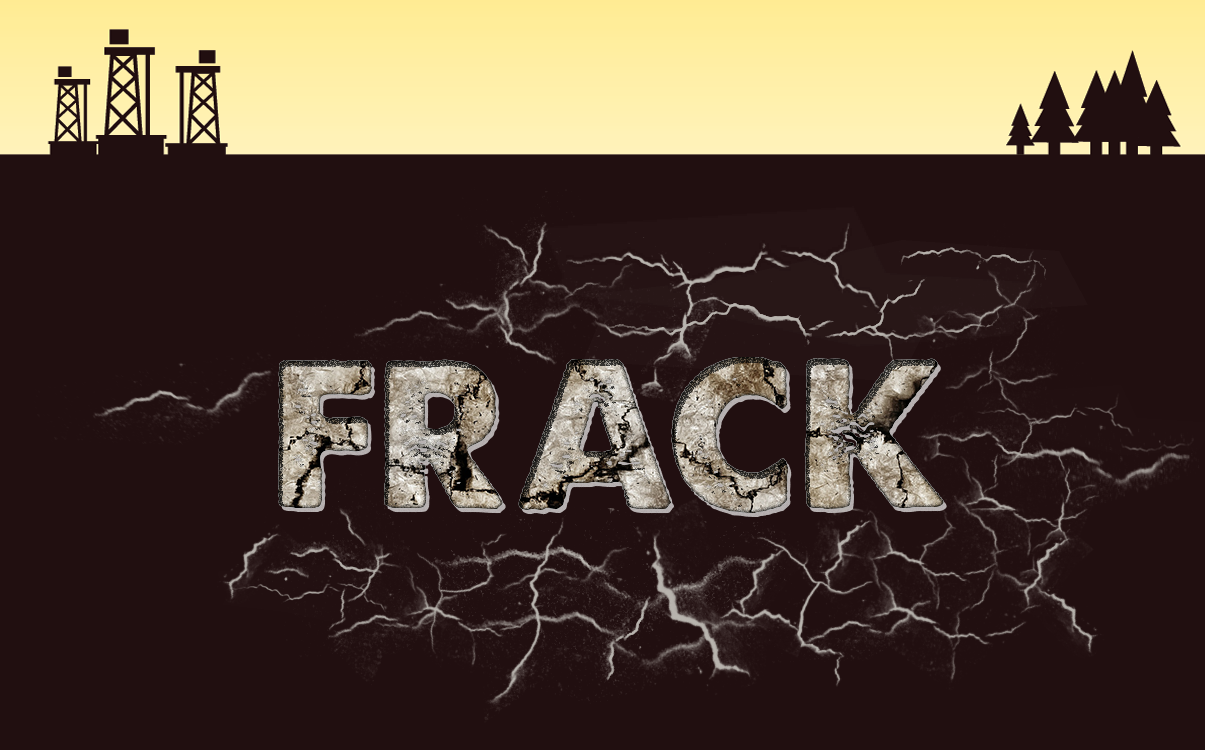
<style>
.page{position:relative;width:1205px;height:750px;background:#210f10}
.page>*{position:absolute;margin:0}
.t1{font:200px "ALoveofThunder"}
</style>
<div class="page">
<p class="t1" style="left:278px;top:357px;width:666px;height:156px">FRACK</p>
<p class="t1" style="left:278px;top:357px;width:666px;height:156px">FRACK</p>
<p class="t1" style="left:278px;top:357px;width:666px;height:156px">FRACK</p>
</div>
